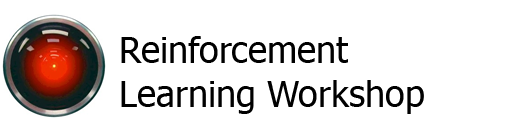
<style>
.page{position:relative;width:506px;height:135px;background:#ffffff}
.page>*{position:absolute;margin:0}
.t1{font:36px "Tahoma";color:#000000}
</style>
<div class="page">
<p class="t1" style="left:121px;top:36px;width:303px;height:78px">Reinforcement Learning Workshop</p>
</div>
